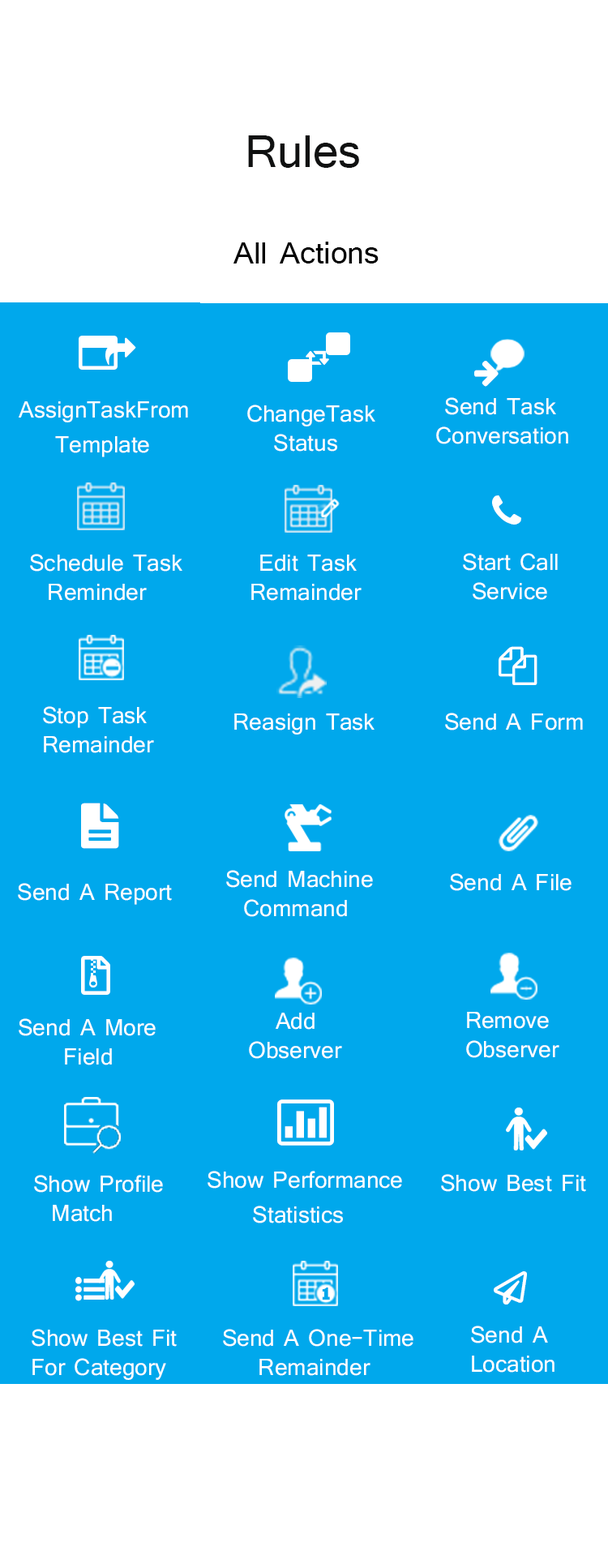
<style>
.page{position:relative;width:608px;height:1568px;background:#00a8ec}
.page>*{position:absolute;margin:0}
.t1{font:58.4px "Tunga";color:#101111}
.t2{font:38.9px "Tunga";color:#000000}
.t3{font:29.2px "Tunga";color:#ffffff}
.t4{font:29.2px/29.2px "Tunga";color:#ffffff}
.t5{font:18.1px "Rockwell-ExtraBold";color:#00a8ec}
</style>
<div class="page">
<p class="t1" style="left:248px;top:135px;width:111px;height:33px">Rules</p>
<p class="t2" style="left:233px;top:242px;width:146px;height:21px">All Actions</p>
<p class="t3" style="left:19px;top:401px;width:169px;height:56px">AssignTaskFrom<br>     Template</p>
<p class="t3" style="left:436px;top:397px;width:132px;height:47px">Send Task Conversation</p>
<p class="t4" style="left:247px;top:405px;width:128px;height:47px">ChangeTask<br>   Status</p>
<p class="t4" style="left:30px;top:554px;width:152px;height:47px">Schedule Task <br>  Reminder</p>
<p class="t3" style="left:251px;top:555px;width:111px;height:46px">Edit Task Remainder</p>
<p class="t4" style="left:463px;top:553px;width:95px;height:47px">Start Call <br>     Service</p>
<p class="t4" style="left:43px;top:706px;width:111px;height:47px">Stop Task <br>Remainder</p>
<p class="t3" style="left:234px;top:713px;width:141px;height:22px">Reasign Task</p>
<p class="t3" style="left:445px;top:713px;width:138px;height:17px">Send A Form</p>
<p class="t4" style="left:226px;top:870px;width:147px;height:47px">Send Machine<br>  Command<br><br> Command</p>
<p class="t3" style="left:450px;top:873px;width:122px;height:18px">Send A File</p>
<p class="t3" style="left:18px;top:883px;width:154px;height:22px">Send A Report</p>
<p class="t3" style="left:249px;top:1013px;width:93px;height:46px">Add Observer</p>
<p class="t4" style="left:466px;top:1012px;width:93px;height:46px">Remove<br> Observer</p>
<p class="t4" style="left:19px;top:1018px;width:137px;height:47px">Send A More <br>     Field</p>
<p class="t4" style="left:34px;top:1175px;width:129px;height:47px">Show Profile <br>  Match</p>
<p class="t3" style="left:208px;top:1171px;width:194px;height:52px">Show Performance<br>     Statistics</p>
<p class="t3" style="left:441px;top:1174px;width:145px;height:18px">Show Best Fit</p>
<p class="t5" style="left:322px;top:1287px;width:8px;height:13px">1</p>
<p class="t4" style="left:471px;top:1326px;width:84px;height:47px">Send A <br>Location</p>
<p class="t4" style="left:32px;top:1329px;width:145px;height:51px">Show Best Fit <br>For Category</p>
<p class="t4" style="left:223px;top:1329px;width:190px;height:47px">Send A One-Time<br>    Remainder<br><br> Command</p>
</div>
